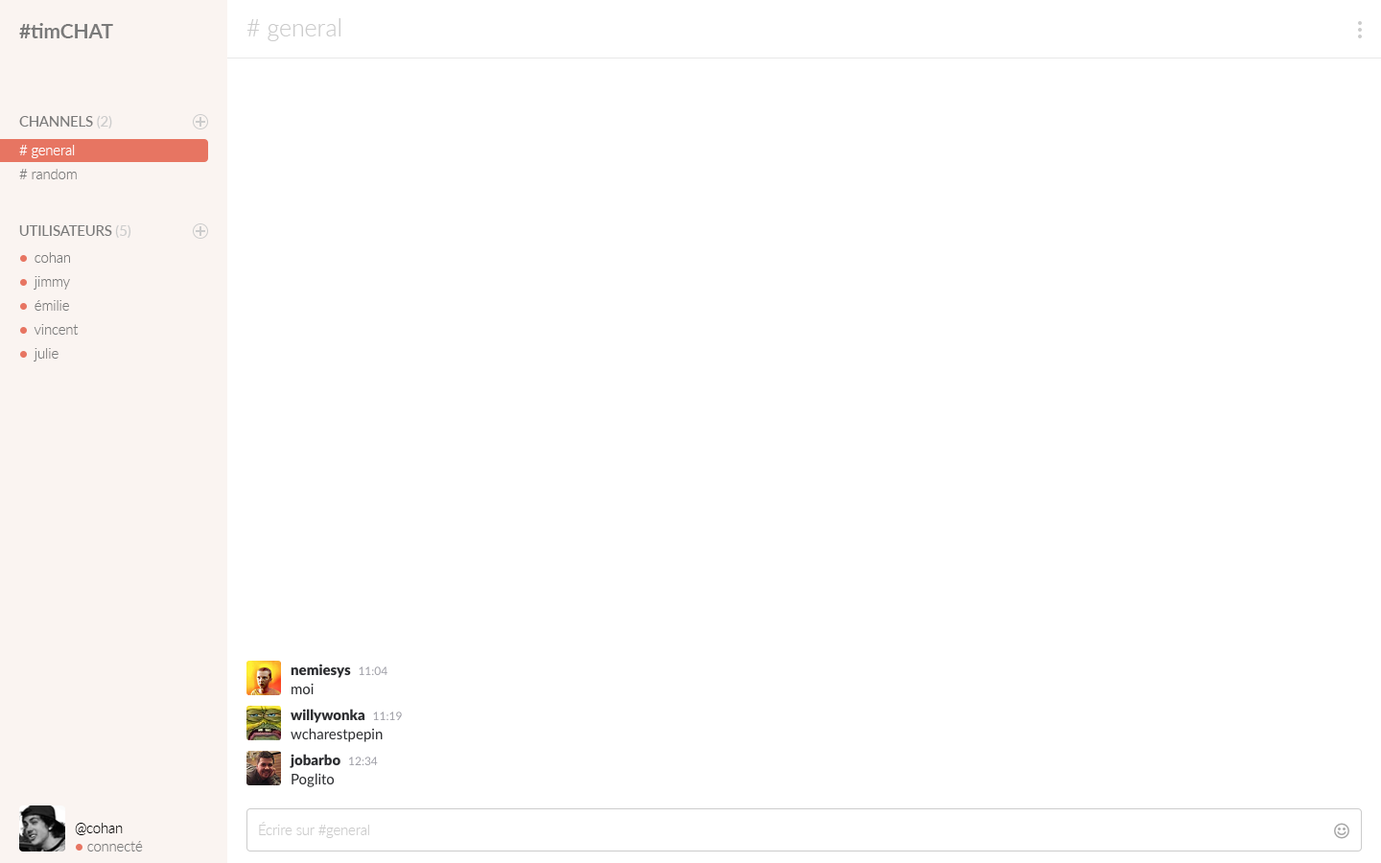
<style>
.page{position:relative;width:1381px;height:863px;background:#ffffff}
.page>*{position:absolute;margin:0}
.t1{font:20px "Lato-Bold";color:#7a7a7a}
.t2{font:24px "Lato-Light";color:#cccccc}
.t3{font:14px "Lato-Medium";color:#7a7a7a}
.t4{font:14px "Lato-Medium";color:#cccccc}
.t5{font:14px/24px "Lato-Light";color:#ffffff}
.t6{font:14px/24px "Lato-Medium";color:#cccccc}
.t7{font:14px/24px "Lato-Light";color:#7a7a7a}
.t8{font:14px "Lato-Light";color:#000000}
.t9{font:14px "Lato-Light";color:#cccccc}
.t10{font:14px "Lato-Light";color:#7a7a7a}
</style>
<div class="page">
<p class="t1" style="left:19px;top:23px;width:94px;height:15px">#timCHAT</p>
<p class="t2" style="left:247px;top:18px;width:94px;height:23px"># general</p>
<p class="t3" style="left:19px;top:115px;width:93px;height:14px">CHANNELS <span class="t4">(2)</span></p>
<p class="t5" style="left:19px;top:145px;width:58px;height:34px"><span class="t6"><br></span># general<br><span class="t7"># random</span></p>
<p class="t3" style="left:19px;top:224px;width:112px;height:15px">UTILISATEURS <span class="t4">(5)</span></p>
<p class="t7" style="left:34px;top:252px;width:45px;height:110px"><span class="t6"><br></span>    cohan<br>    jimmy<br>    émilie<br>    vincent<br>    julie</p>
<p class="t8" style="left:75px;top:823px;width:48px;height:12px">@cohan</p>
<p class="t9" style="left:259px;top:822px;width:110px;height:16px">Écrire sur #general</p>
<p class="t10" style="left:87px;top:841px;width:56px;height:11px">connecté</p>
</div>
